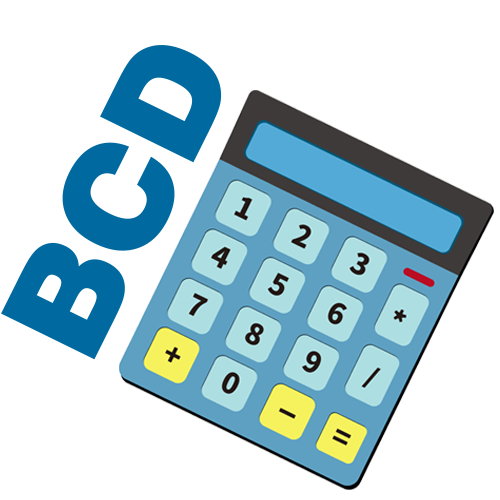
<style>
.page{position:relative;width:500px;height:500px;background:#ffffff}
.page>*{position:absolute;margin:0}
.t1{font:144.3px "Swiss721BT-Black";color:#006aa0}
</style>
<div class="page">
<p class="t1" style="left:1px;top:45px;width:221px;height:315px;rotate:-63deg">BCD</p>
</div>
